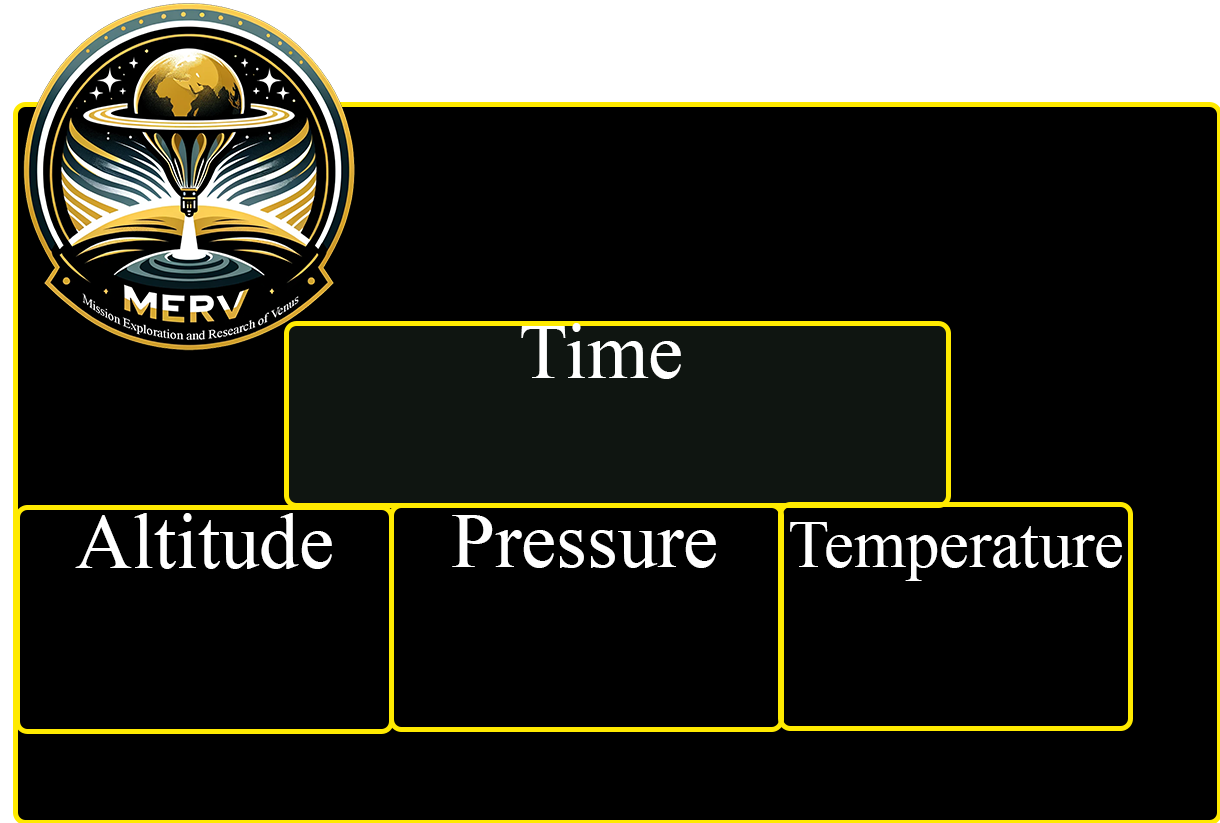
<style>
.page{position:relative;width:1220px;height:823px;background:#000000}
.page>*{position:absolute;margin:0}
.t1{font:79px "TimesNewRomanPSMT";color:#ffffff}
.t2{font:66.7px "TimesNewRomanPSMT";color:#ffffff}
</style>
<div class="page">
<p class="t1" style="left:521px;top:323px;width:160px;height:56px">Time</p>
<p class="t1" style="left:75px;top:513px;width:257px;height:56px">Altitude</p>
<p class="t1" style="left:452px;top:515px;width:264px;height:53px">Pressure</p>
<p class="t2" style="left:790px;top:522px;width:332px;height:59px">Temperature</p>
</div>
